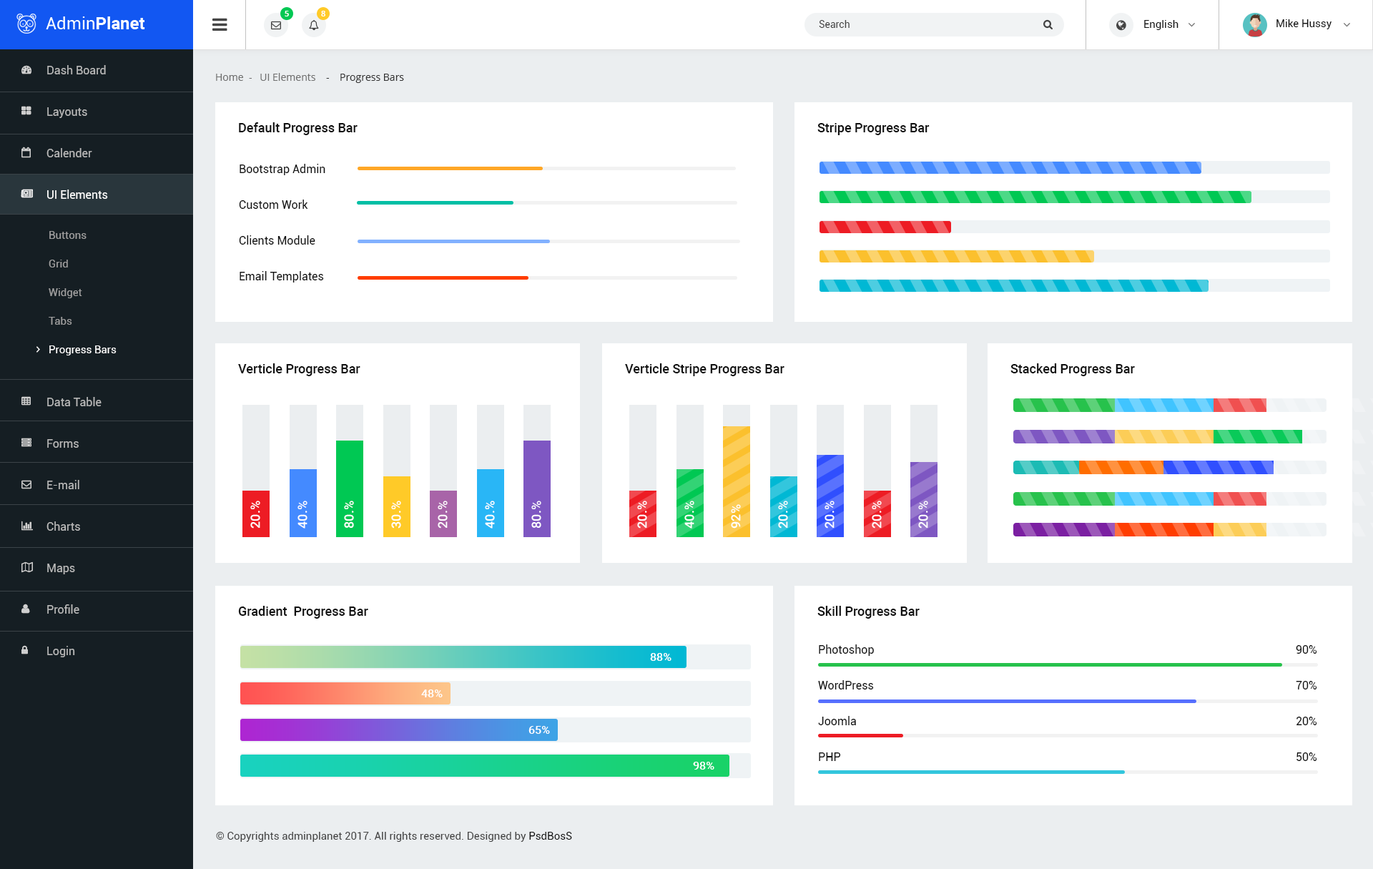
<style>
.page{position:relative;width:1373px;height:869px;background:#ffffff}
.page>*{position:absolute;margin:0}
.t1{font:7.9px "OpenSans-Semibold";color:#ffffff}
.t2{font:10px "Roboto-Regular";color:#444444}
.t3{font:10.7px "Roboto-Regular";color:#111111}
.t4{font:11.4px/41.5px "Roboto-Regular";color:#b9b9b9}
.t5{font:11.4px/41.5px "Roboto-Regular";color:#ffffff}
.t6{font:10px "OpenSans";color:#707070}
.t7{font:10px "OpenSans";color:#333333}
.t8{font:12.9px "Roboto-Medium";color:#111111}
.t9{font:11.4px/35.7px "Roboto-Regular";color:#111111}
.t10{font:10.7px/28.6px "Roboto-Regular";color:#a0a0a0}
.t11{font:10.7px/28.6px "Roboto-Regular";color:#ffffff}
.t12{font:12.7px "Roboto-Medium";color:#ffffff}
.t13{font:11.4px "Roboto-Medium";color:#ffffff}
.t14{font:10.7px "Roboto-Regular";color:#444444}
</style>
<div class="page">
<p class="t1" style="left:285px;top:11px;width:4px;height:5px">5</p>
<p class="t1" style="left:321px;top:11px;width:4px;height:5px">8</p>
<p class="t2" style="left:819px;top:20px;width:30px;height:8px">Search</p>
<p class="t3" style="left:1144px;top:20px;width:34px;height:10px">English</p>
<p class="t3" style="left:1276px;top:19px;width:55px;height:10px">Mike Hussy</p>
<p class="t4" style="left:46px;top:65px;width:62px;height:592px">Dash Board<br>Layouts<br>Calender<br><span class="t5">UI Elements<br></span><br><br><br><br>Data Table<br>Forms<br>E-mail<br>Charts<br>Maps<br>Profile<br>Login</p>
<p class="t6" style="left:216px;top:73px;width:188px;height:10px">Home  -   UI Elements   <span class="t7"> -    Progress Bars</span></p>
<p class="t8" style="left:239px;top:122px;width:118px;height:13px">Default Progress Bar</p>
<p class="t8" style="left:817px;top:123px;width:112px;height:12px">Stripe Progress Bar</p>
<p class="t9" style="left:239px;top:164px;width:86px;height:118px">Bootstrap Admin<br>Custom Work<br>Clients Module<br>Email Templates</p>
<p class="t10" style="left:49px;top:231px;width:68px;height:124px">Buttons<br>Grid<br>Widget<br>Tabs<br><span class="t11">Progress Bars</span></p>
<p class="t8" style="left:238px;top:363px;width:122px;height:13px">Verticle Progress Bar</p>
<p class="t8" style="left:625px;top:363px;width:159px;height:13px">Verticle Stripe Progress Bar</p>
<p class="t8" style="left:1010px;top:363px;width:125px;height:13px">Stacked Progress Bar</p>
<p class="t12" style="left:250px;top:500px;width:10px;height:28px;rotate:-90deg">20.%</p>
<p class="t12" style="left:297px;top:500px;width:10px;height:28px;rotate:-90deg">40.%</p>
<p class="t12" style="left:344px;top:500px;width:10px;height:28px;rotate:-90deg">80.%</p>
<p class="t12" style="left:391px;top:500px;width:10px;height:28px;rotate:-90deg">30.%</p>
<p class="t12" style="left:438px;top:500px;width:10px;height:28px;rotate:-90deg">20.%</p>
<p class="t12" style="left:485px;top:500px;width:10px;height:28px;rotate:-90deg">40.%</p>
<p class="t12" style="left:531px;top:500px;width:10px;height:28px;rotate:-90deg">80.%</p>
<p class="t12" style="left:637px;top:500px;width:10px;height:28px;rotate:-90deg">20.%</p>
<p class="t12" style="left:684px;top:500px;width:10px;height:28px;rotate:-90deg">40.%</p>
<p class="t12" style="left:731px;top:504px;width:10px;height:24px;rotate:-90deg">92%</p>
<p class="t12" style="left:778px;top:500px;width:10px;height:28px;rotate:-90deg">20.%</p>
<p class="t12" style="left:824px;top:500px;width:10px;height:28px;rotate:-90deg">20.%</p>
<p class="t12" style="left:872px;top:500px;width:10px;height:28px;rotate:-90deg">20.%</p>
<p class="t12" style="left:918px;top:500px;width:10px;height:28px;rotate:-90deg">20.%</p>
<p class="t8" style="left:238px;top:606px;width:130px;height:12px">Gradient  Progress Bar</p>
<p class="t8" style="left:817px;top:606px;width:102px;height:12px">Skill Progress Bar</p>
<p class="t13" style="left:650px;top:653px;width:21px;height:8px">88%</p>
<p class="t9" style="left:818px;top:644px;width:56px;height:117px">Photoshop<br>WordPress<br>Joomla<br>PHP</p>
<p class="t9" style="left:1295px;top:645px;width:22px;height:116px">90%<br>70%<br>20%<br>50%</p>
<p class="t13" style="left:421px;top:689px;width:22px;height:8px">48%</p>
<p class="t13" style="left:528px;top:726px;width:22px;height:8px">65%</p>
<p class="t13" style="left:693px;top:761px;width:21px;height:8px">98%</p>
<p class="t14" style="left:216px;top:831px;width:356px;height:11px">© Copyrights adminplanet 2017. All rights reserved. Designed by <span class="t3">PsdBosS</span></p>
</div>
